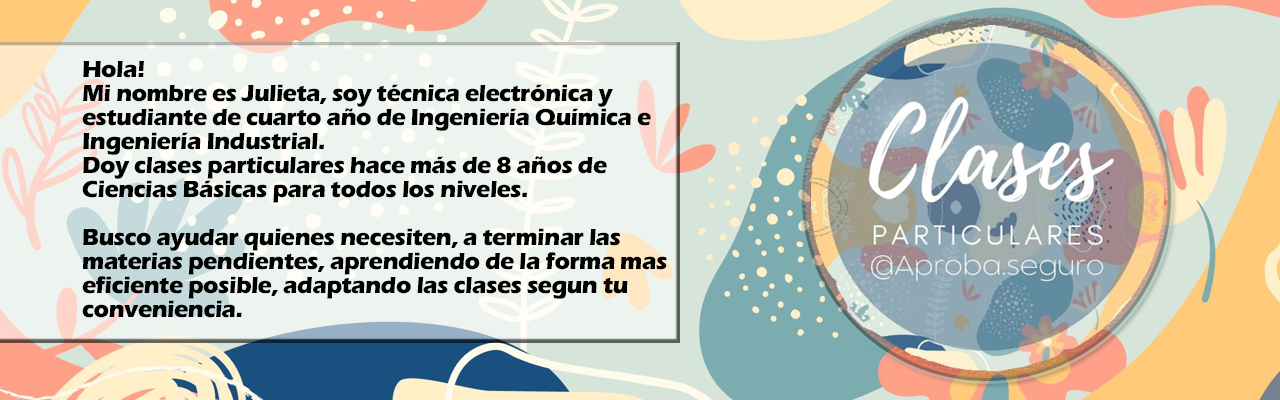
<style>
.page{position:relative;width:1280px;height:400px}
.page>*{position:absolute;margin:0}
.t1{font:24px/24px "ErasITC-Bold";letter-spacing:-0.025em;color:#000000}
</style>
<div class="page">
<p class="t1" style="left:82px;top:61px;width:585px;height:257px">Hola! <br>Mi nombre es Julieta, soy técnica electrónica y estudiante de cuarto año de Ingeniería Química e Ingeniería Industrial. <br>Doy clases particulares hace más de 8 años de Ciencias Básicas para todos los niveles.<br><br>Busco ayudar quienes necesiten, a terminar las materias pendientes, aprendiendo de la forma mas eficiente posible, adaptando las clases segun tu conveniencia.</p>
</div>
